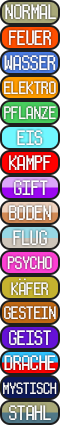
<style>
.page{position:relative;width:60px;height:425px}
.page>*{position:absolute;margin:0}
.t1{font:23px "Pokemon R/S";color:#ffffff}
.t2{font:20px "Pokemon R/S";color:#ffffff}
.t3{font:18px "Pokemon R/S";color:#ffffff}
</style>
<div class="page">
<p class="t1" style="left:5px;top:4px;width:51px;height:15px">NORMAL</p>
<p class="t1" style="left:9px;top:30px;width:42px;height:15px">FEUER</p>
<p class="t1" style="left:4px;top:55px;width:52px;height:15px">WASSER</p>
<p class="t2" style="left:4px;top:81px;width:52px;height:13px">ELEKTRO</p>
<p class="t2" style="left:4px;top:106px;width:52px;height:13px">PFLANZE</p>
<p class="t1" style="left:17px;top:130px;width:26px;height:15px">EIS</p>
<p class="t1" style="left:9px;top:155px;width:42px;height:15px">KAMPF</p>
<p class="t1" style="left:14px;top:180px;width:34px;height:15px">GIFT</p>
<p class="t1" style="left:9px;top:205px;width:42px;height:15px">BODEN</p>
<p class="t1" style="left:13px;top:230px;width:34px;height:15px">FLUG</p>
<p class="t2" style="left:7px;top:256px;width:45px;height:13px">PSYCHO</p>
<p class="t2" style="left:11px;top:278px;width:37px;height:17px">KÄFER</p>
<p class="t2" style="left:4px;top:306px;width:52px;height:13px">GESTEIN</p>
<p class="t1" style="left:9px;top:330px;width:42px;height:15px">GEIST</p>
<p class="t1" style="left:4px;top:355px;width:52px;height:15px">DRACHE</p>
<p class="t3" style="left:3px;top:382px;width:54px;height:12px">MYSTISCH</p>
<p class="t1" style="left:9px;top:405px;width:42px;height:15px">STAHL</p>
</div>
